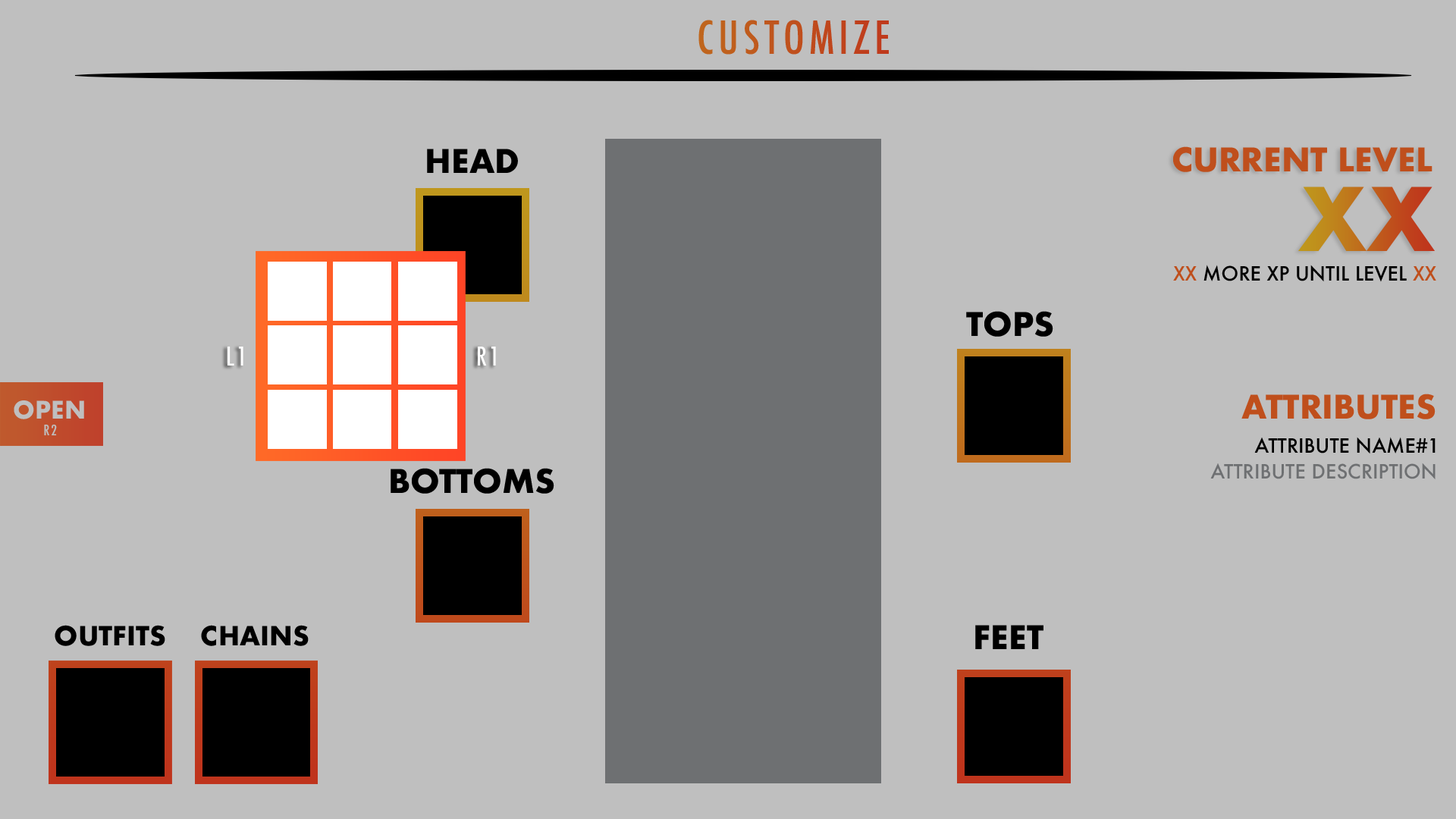
<style>
.page{position:relative;width:1456px;height:819px;background:#bfbfbf}
.page>*{position:absolute;margin:0}
.t1{font:44.2px "Futura-CondensedMedium";letter-spacing:0.1em;color:#bf4e1c}
.t2{font:31.6px "Futura-Bold";color:#000000}
.t3{font:31.6px "Futura-Bold";color:#bf4f1c}
.t4{font:85.2px "Futura-Bold"}
.t5{font:19.2px "Futura-Medium";color:#000000}
.t6{font:19.2px "Futura-Medium";color:#ff6926}
.t7{font:25.3px "Futura-CondensedMedium";letter-spacing:0.1em;color:#ffffff}
.t8{font:23.6px "Futura-Bold";color:#bfbfbf}
.t9{font:14.1px "Futura-CondensedMedium";letter-spacing:0.1em;color:#bfbfbf}
.t10{font:19.2px "Futura-Medium";color:#6e7072}
.t11{font:25.7px "Futura-Bold";color:#000000}
</style>
<div class="page">
<p class="t1" style="left:698px;top:20px;width:191px;height:35px">CUSTOMIZE</p>
<p class="t2" style="left:427px;top:149px;width:91px;height:24px">HEAD</p>
<p class="t3" style="left:1173px;top:146px;width:259px;height:26px">CURRENT LEVEL</p>
<p class="t4" style="left:1298px;top:187px;width:138px;height:64px">XX</p>
<p class="t5" style="left:1173px;top:265px;width:263px;height:17px"><span class="t6">XX</span> MORE XP UNTIL LEVEL <span class="t6">XX</span></p>
<p class="t2" style="left:966px;top:311px;width:87px;height:26px">TOPS</p>
<p class="t7" style="left:227px;top:347px;width:16px;height:19px">L1</p>
<p class="t7" style="left:478px;top:347px;width:18px;height:19px">R1</p>
<p class="t8" style="left:14px;top:400px;width:70px;height:19px">OPEN</p>
<p class="t3" style="left:1241px;top:394px;width:195px;height:25px">ATTRIBUTES</p>
<p class="t9" style="left:44px;top:424px;width:13px;height:12px">R2</p>
<p class="t5" style="left:1254px;top:437px;width:182px;height:16px">ATTRIBUTE NAME#1</p>
<p class="t2" style="left:391px;top:468px;width:163px;height:26px">BOTTOMS</p>
<p class="t10" style="left:1210px;top:463px;width:226px;height:16px">ATTRIBUTE DESCRIPTION</p>
<p class="t11" style="left:55px;top:625px;width:110px;height:21px">OUTFITS</p>
<p class="t11" style="left:201px;top:625px;width:108px;height:21px">CHAINS</p>
<p class="t2" style="left:975px;top:625px;width:68px;height:24px">FEET</p>
</div>
